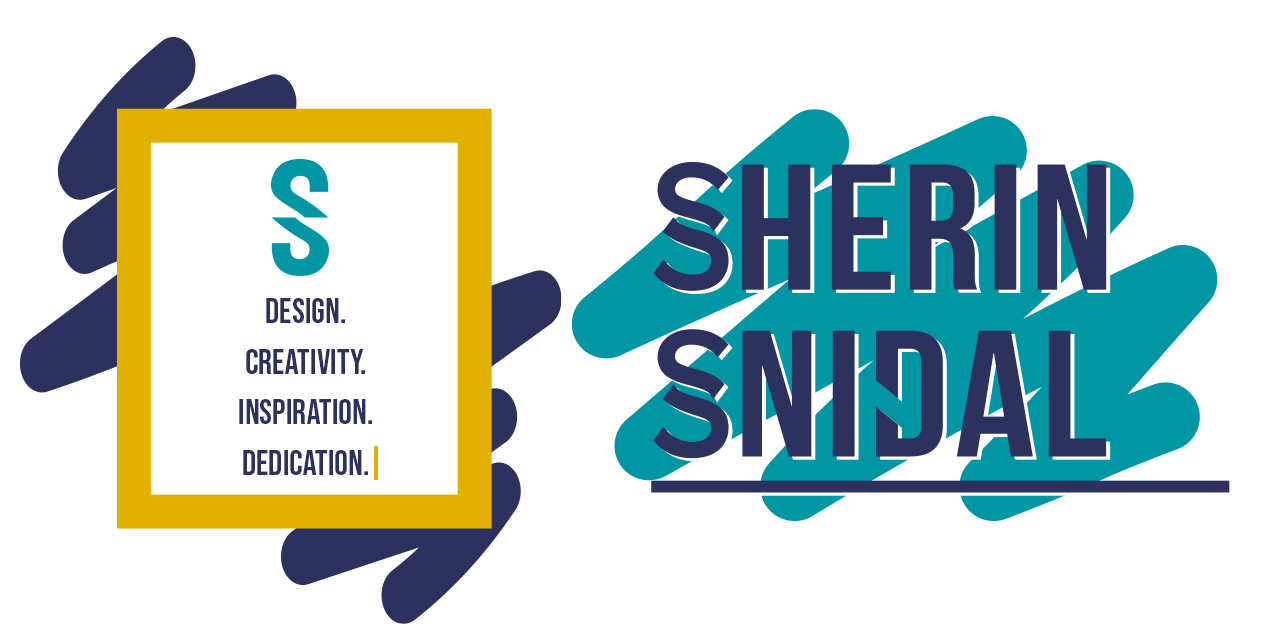
<style>
.page{position:relative;width:1280px;height:640px;background:#ffffff}
.page>*{position:absolute;margin:0}
.t1{font:34.9px/50.4px "BebasNeuePro-Bold";color:#2d315d}
</style>
<div class="page">
<p class="t1" style="left:239px;top:298px;width:133px;height:177px;text-align:center">DESIGN.<br>CREATIVITY.<br>INSPIRATION.<br>DEDICATION.</p>
</div>
